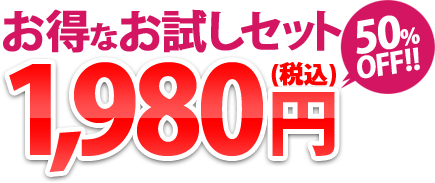
<style>
.page{position:relative;width:435px;height:183px;background:#ffffff}
.page>*{position:absolute;margin:0}
.t1{font:45px "KozGoPro-Bold";color:#d41662;font-weight:bold}
.t2{font:30px "KozGoPro-Bold";color:#d41662;font-weight:bold}
.t3{font:28.1px/38.1px "KozGoPro-Bold";color:#ffffff;font-weight:bold}
.t4{font:42.2px/38.1px "KozGoPro-Bold";color:#ffffff;font-weight:bold}
.t5{font:21.1px/38.1px "KozGoPro-Bold";color:#ffffff;font-weight:bold}
.t6{font:120px "KozGoPro-Heavy"}
.t7{font:72px "KozGoPro-Heavy"}
.t8{font:24px "KozGoPro-Heavy";color:#fe0000;font-weight:bold}
</style>
<div class="page">
<p class="t1" style="left:3px;top:9px;width:339px;height:44px">お得<span class="t2">な</span>お試しセット</p>
<p class="t3" style="left:356px;top:15px;width:64px;height:64px;rotate:-10deg"><span class="t4">50</span><span class="t5">％<br></span>OFF!!</p>
<p class="t6" style="left:9px;top:62px;width:326px;height:110px">1,980<span class="t7">円</span></p>
<p class="t8" style="left:271px;top:62px;width:65px;height:25px">(税込)</p>
</div>
